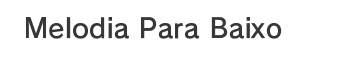
<style>
.page{position:relative;width:342px;height:60px;background:#ffffff}
.page>*{position:absolute;margin:0}
.t1{font:26.7px "RodinPro-DB";letter-spacing:0.008em;color:#383738}
</style>
<div class="page">
<p class="t1" style="left:26px;top:17px;width:256px;height:22px">Melodia Para Baixo</p>
</div>
